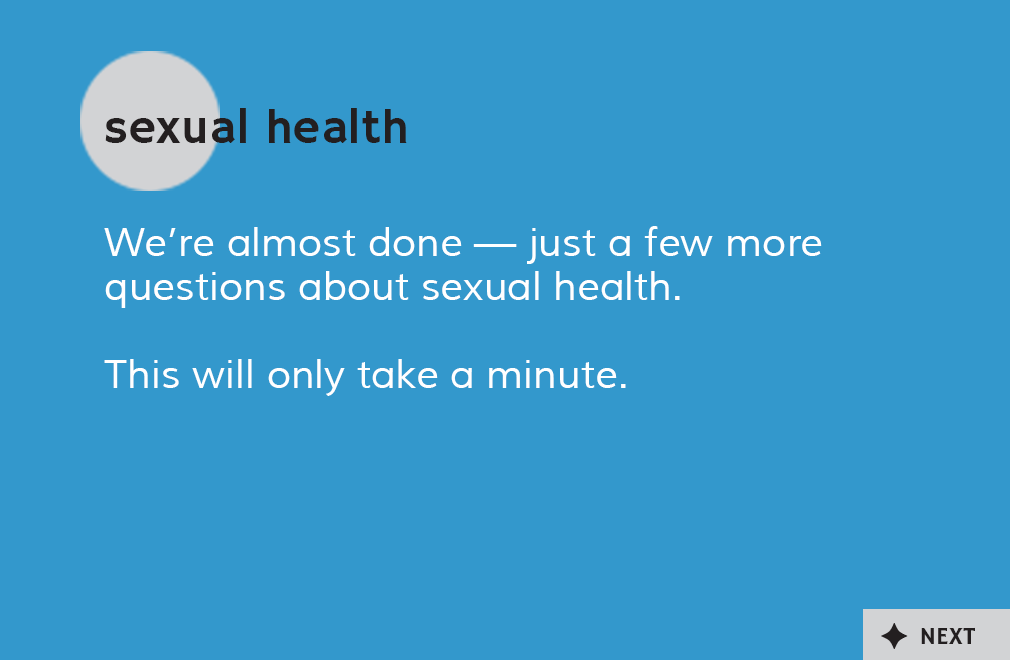
<style>
.page{position:relative;width:1010px;height:660px;background:#3398cc}
.page>*{position:absolute;margin:0}
.t1{font:48px "HammersmithOne-Regular";color:#231f20}
.t2{font:40px/44px "Muli";color:#ffffff}
.t3{font:25px "HammersmithOne-Regular";color:#231f20}
</style>
<div class="page">
<p class="t1" style="left:105px;top:108px;width:302px;height:35px">sexual health</p>
<p class="t2" style="left:104px;top:226px;width:718px;height:170px">We’re almost done — just a few more questions about sexual health. <br><br>This will only take a minute.</p>
<p class="t3" style="left:921px;top:627px;width:54px;height:17px">NEXT</p>
</div>
